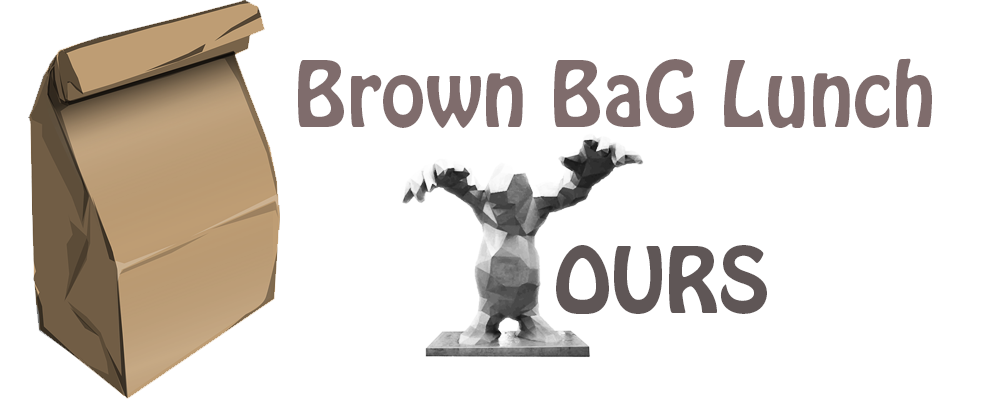
<style>
.page{position:relative;width:1000px;height:400px;background:#ffffff}
.page>*{position:absolute;margin:0}
.t1{font:80px "HoboStd";color:#7f6c6c}
.t2{font:80px "HoboStd";color:#5f5656}
</style>
<div class="page">
<p class="t1" style="left:298px;top:58px;width:634px;height:70px">Brown BaG Lunch</p>
<p class="t2" style="left:556px;top:245px;width:211px;height:69px">OURS</p>
</div>
